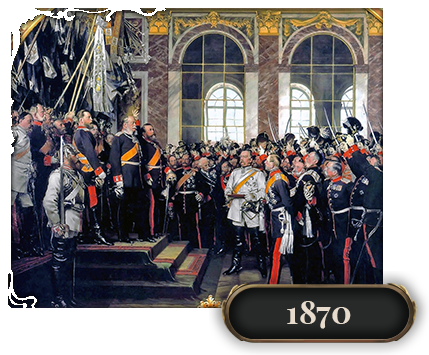
<style>
.page{position:relative;width:429px;height:355px;background:#ffffff}
.page>*{position:absolute;margin:0}
.t1{font:32px "PlayfairDisplay-Bold";color:#e6dbcc}
</style>
<div class="page">
<p class="t1" style="left:287px;top:301px;width:64px;height:28px">1870</p>
</div>
